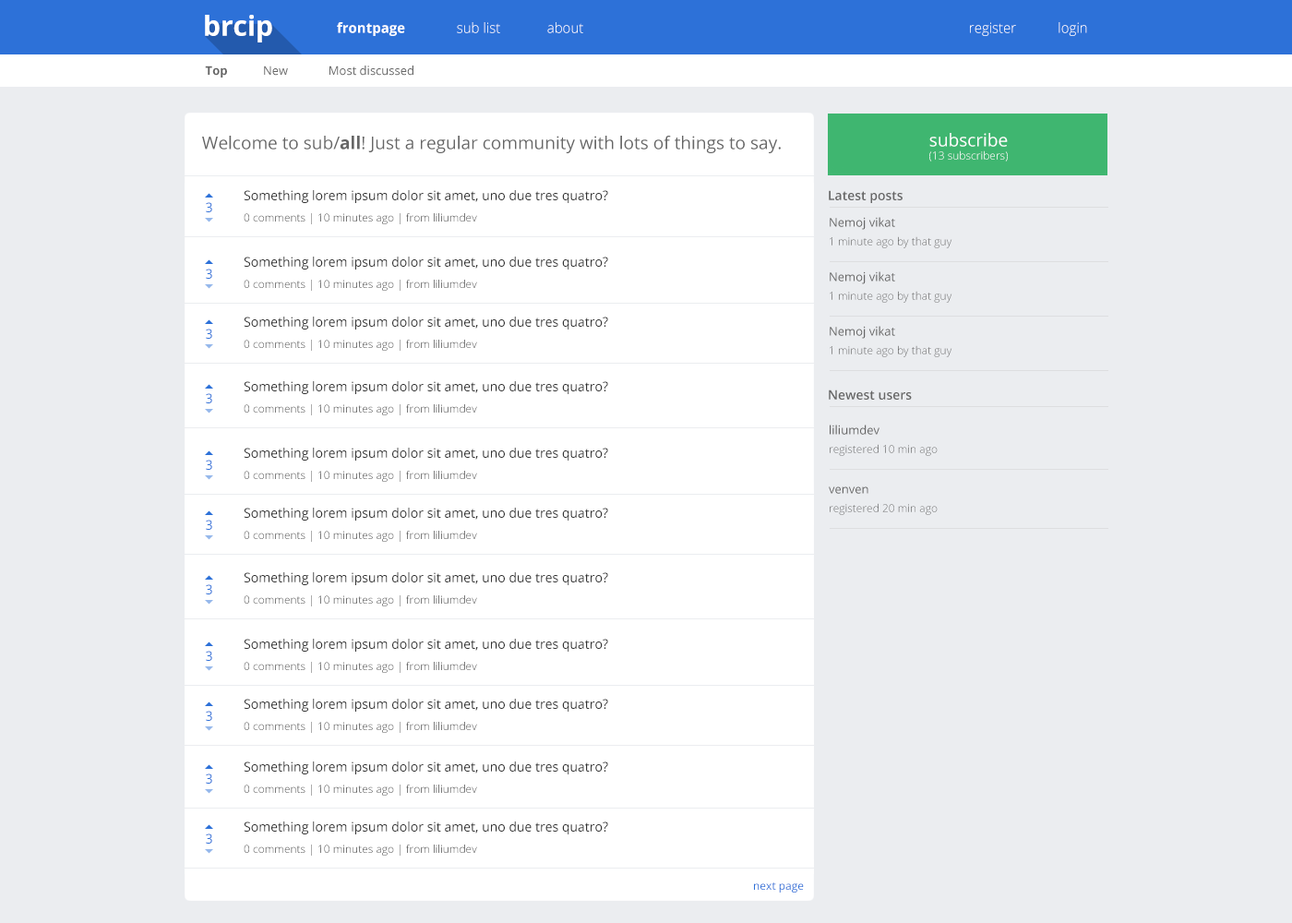
<style>
.page{position:relative;width:1292px;height:923px;background:#ebedf0}
.page>*{position:absolute;margin:0}
.t1{font:27.7px "OpenSans-Bold";color:#ffffff}
.t2{font:13.8px "OpenSans-Bold";color:#ffffff}
.t3{font:13.8px "OpenSans-Light"}
.t4{font:13.8px "OpenSans-Light";color:#ffffff}
.t5{font:12px "OpenSans-Bold";color:#666666}
.t6{font:12px "OpenSans";color:#666666}
.t7{font:17.5px "OpenSans";color:#666666}
.t8{font:17.5px "OpenSans-Bold";color:#666666}
.t9{font:11.1px "OpenSans-Light";color:#ffffff}
.t10{font:17.5px "OpenSans";color:#ffffff}
.t11{font:12.9px "OpenSans";color:#333333}
.t12{font:12.9px "OpenSans-Semibold";color:#666666}
.t13{font:12.9px "OpenSans";color:#2d71d8}
.t14{font:11.1px "OpenSans-Light"}
.t15{font:11.1px "OpenSans-Light";color:#666666}
.t16{font:11.1px "OpenSans";color:#2d71d8}
</style>
<div class="page">
<p class="t1" style="left:205px;top:15px;width:67px;height:27px">brcip</p>
<p class="t2" style="left:337px;top:22px;width:68px;height:14px">frontpage</p>
<p class="t3" style="left:457px;top:22px;width:43px;height:11px">sub list</p>
<p class="t4" style="left:547px;top:22px;width:36px;height:11px">about</p>
<p class="t4" style="left:970px;top:22px;width:46px;height:14px">register</p>
<p class="t4" style="left:1059px;top:22px;width:28px;height:14px">login</p>
<p class="t5" style="left:205px;top:66px;width:22px;height:12px">Top</p>
<p class="t6" style="left:264px;top:66px;width:24px;height:10px">New</p>
<p class="t6" style="left:329px;top:66px;width:84px;height:10px">Most discussed</p>
<p class="t7" style="left:202px;top:136px;width:579px;height:17px">Welcome to sub/<span class="t8">all</span>! Just a regular community with lots of things to say.</p>
<p class="t9" style="left:929px;top:133px;width:79px;height:29px;text-align:center"><span class="t10">subscribe<br></span>(13 subscribers)</p>
<p class="t11" style="left:244px;top:190px;width:364px;height:13px">Something lorem ipsum dolor sit amet, uno due tres quatro?</p>
<p class="t12" style="left:829px;top:190px;width:74px;height:13px">Latest posts</p>
<p class="t13" style="left:206px;top:202px;width:6px;height:10px">3</p>
<p class="t14" style="left:244px;top:213px;width:233px;height:11px">0 comments | 10 minutes ago | from liliumdev</p>
<p class="t6" style="left:830px;top:217px;width:65px;height:13px">Nemoj vikat</p>
<p class="t15" style="left:830px;top:236px;width:122px;height:12px">1 minute ago by that guy</p>
<p class="t11" style="left:244px;top:257px;width:364px;height:12px">Something lorem ipsum dolor sit amet, uno due tres quatro?</p>
<p class="t13" style="left:206px;top:269px;width:6px;height:10px">3</p>
<p class="t14" style="left:244px;top:280px;width:233px;height:11px">0 comments | 10 minutes ago | from liliumdev</p>
<p class="t6" style="left:830px;top:271px;width:65px;height:13px">Nemoj vikat</p>
<p class="t15" style="left:830px;top:291px;width:122px;height:12px">1 minute ago by that guy</p>
<p class="t11" style="left:244px;top:317px;width:364px;height:12px">Something lorem ipsum dolor sit amet, uno due tres quatro?</p>
<p class="t13" style="left:206px;top:329px;width:6px;height:10px">3</p>
<p class="t6" style="left:830px;top:326px;width:65px;height:13px">Nemoj vikat</p>
<p class="t14" style="left:244px;top:340px;width:233px;height:11px">0 comments | 10 minutes ago | from liliumdev</p>
<p class="t15" style="left:830px;top:345px;width:122px;height:12px">1 minute ago by that guy</p>
<p class="t11" style="left:244px;top:381px;width:364px;height:13px">Something lorem ipsum dolor sit amet, uno due tres quatro?</p>
<p class="t12" style="left:829px;top:389px;width:83px;height:11px">Newest users</p>
<p class="t13" style="left:206px;top:393px;width:6px;height:10px">3</p>
<p class="t14" style="left:244px;top:404px;width:233px;height:11px">0 comments | 10 minutes ago | from liliumdev</p>
<p class="t6" style="left:830px;top:425px;width:50px;height:10px">liliumdev</p>
<p class="t11" style="left:244px;top:448px;width:364px;height:13px">Something lorem ipsum dolor sit amet, uno due tres quatro?</p>
<p class="t15" style="left:830px;top:444px;width:108px;height:12px">registered 10 min ago</p>
<p class="t13" style="left:206px;top:460px;width:6px;height:10px">3</p>
<p class="t14" style="left:244px;top:471px;width:233px;height:11px">0 comments | 10 minutes ago | from liliumdev</p>
<p class="t6" style="left:829px;top:486px;width:39px;height:8px">venven</p>
<p class="t11" style="left:244px;top:508px;width:364px;height:13px">Something lorem ipsum dolor sit amet, uno due tres quatro?</p>
<p class="t15" style="left:830px;top:503px;width:108px;height:12px">registered 20 min ago</p>
<p class="t13" style="left:206px;top:520px;width:6px;height:10px">3</p>
<p class="t14" style="left:244px;top:531px;width:233px;height:11px">0 comments | 10 minutes ago | from liliumdev</p>
<p class="t11" style="left:244px;top:572px;width:364px;height:13px">Something lorem ipsum dolor sit amet, uno due tres quatro?</p>
<p class="t13" style="left:206px;top:584px;width:6px;height:10px">3</p>
<p class="t14" style="left:244px;top:595px;width:233px;height:11px">0 comments | 10 minutes ago | from liliumdev</p>
<p class="t11" style="left:244px;top:639px;width:364px;height:13px">Something lorem ipsum dolor sit amet, uno due tres quatro?</p>
<p class="t13" style="left:206px;top:651px;width:6px;height:10px">3</p>
<p class="t14" style="left:244px;top:662px;width:233px;height:11px">0 comments | 10 minutes ago | from liliumdev</p>
<p class="t11" style="left:244px;top:699px;width:364px;height:13px">Something lorem ipsum dolor sit amet, uno due tres quatro?</p>
<p class="t13" style="left:206px;top:711px;width:6px;height:10px">3</p>
<p class="t14" style="left:244px;top:722px;width:233px;height:11px">0 comments | 10 minutes ago | from liliumdev</p>
<p class="t11" style="left:244px;top:761px;width:364px;height:13px">Something lorem ipsum dolor sit amet, uno due tres quatro?</p>
<p class="t13" style="left:206px;top:773px;width:6px;height:11px">3</p>
<p class="t14" style="left:244px;top:784px;width:233px;height:12px">0 comments | 10 minutes ago | from liliumdev</p>
<p class="t11" style="left:244px;top:821px;width:364px;height:13px">Something lorem ipsum dolor sit amet, uno due tres quatro?</p>
<p class="t13" style="left:206px;top:833px;width:6px;height:11px">3</p>
<p class="t14" style="left:244px;top:844px;width:233px;height:12px">0 comments | 10 minutes ago | from liliumdev</p>
<p class="t16" style="left:754px;top:882px;width:50px;height:10px">next page</p>
</div>
